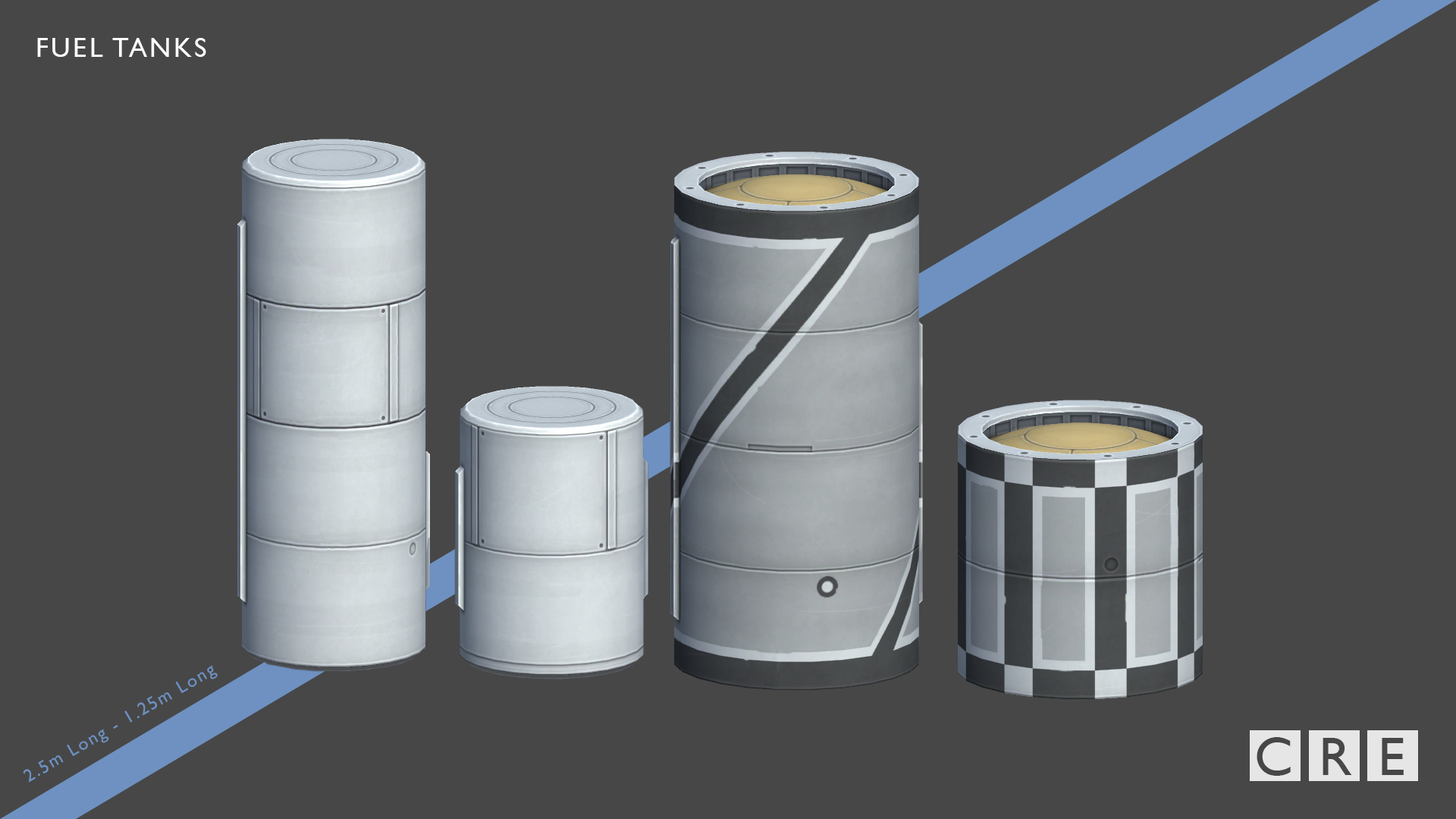
<style>
.page{position:relative;width:1456px;height:819px;background:#474747}
.page>*{position:absolute;margin:0}
.t1{font:27.3px "GillSansMT";letter-spacing:0.1em;color:#ffffff}
.t2{font:54.6px "GillSansMT";letter-spacing:0.1em;color:#474747}
</style>
<div class="page">
<p class="t1" style="left:37px;top:38px;width:169px;height:19px">FUEL TANKS</p>
<p class="t2" style="left:1257px;top:737px;width:147px;height:39px">C R E</p>
</div>
